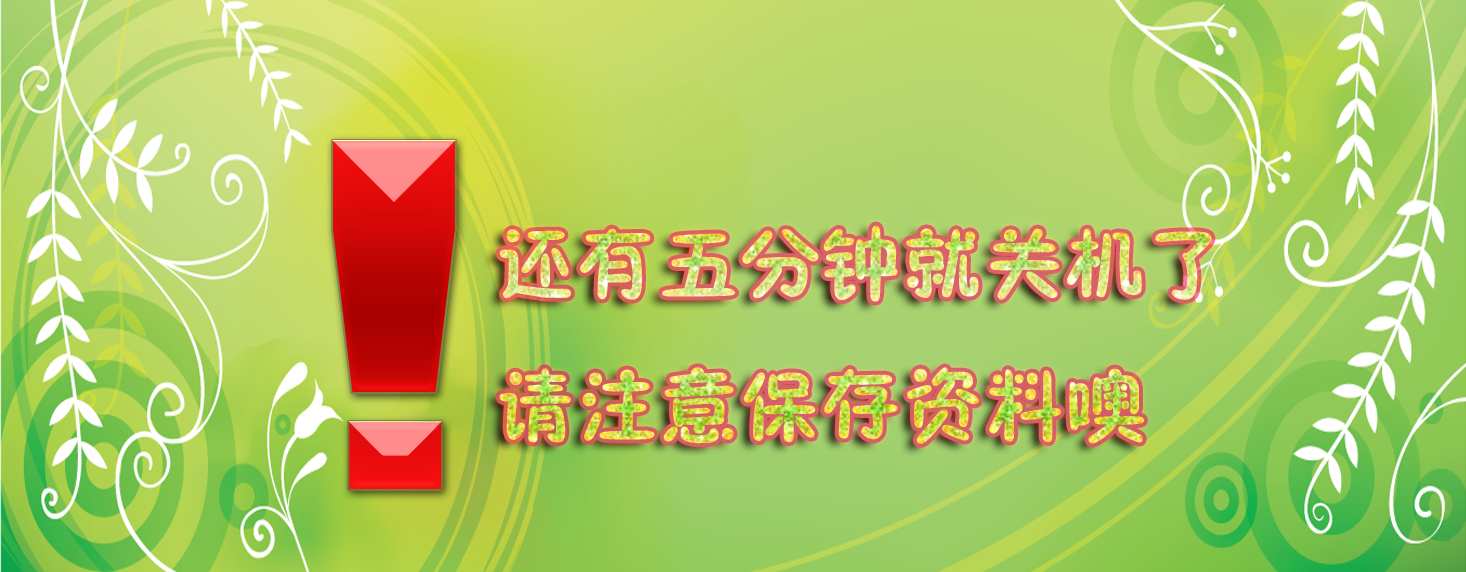
<style>
.page{position:relative;width:1466px;height:572px}
.page>*{position:absolute;margin:0}
.t1{font:81.3px "FZSEK--GBK1-0"}
</style>
<div class="page">
<p class="t1" style="left:499px;top:225px;width:713px;height:219px">还有五分钟就关机了<br>请注意保存资料噢</p>
</div>
